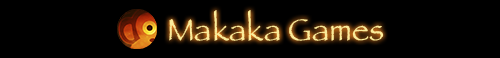
<style>
.page{position:relative;width:500px;height:58px;background:#000000}
.page>*{position:absolute;margin:0}
.t1{font:32px "Papyrus";color:#faec9b}
</style>
<div class="page">
<p class="t1" style="left:169px;top:10px;width:215px;height:31px">Makaka Games</p>
</div>
